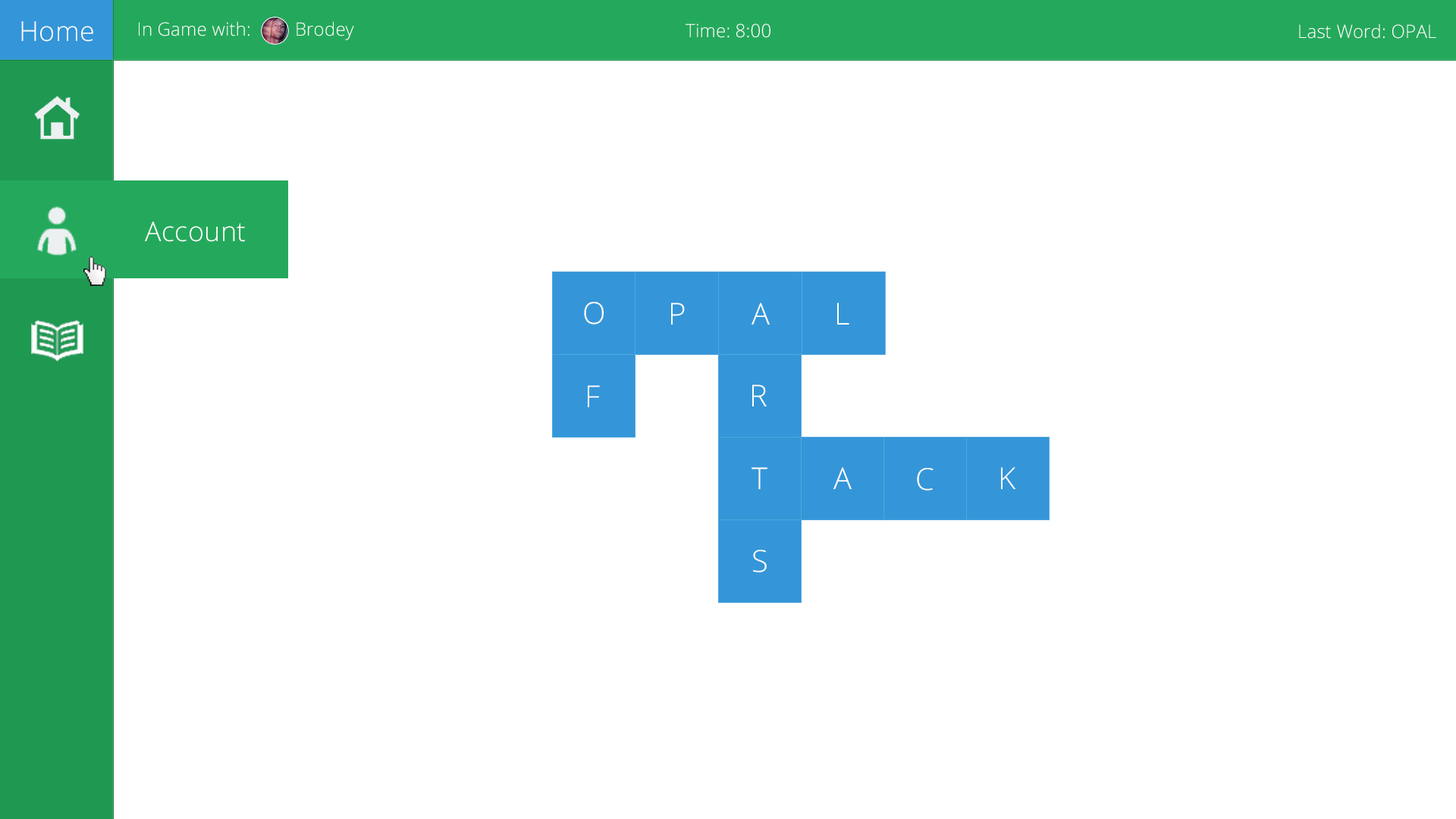
<style>
.page{position:relative;width:1456px;height:819px;background:#ffffff}
.page>*{position:absolute;margin:0}
.t1{font:27.3px "OpenSans-Light";letter-spacing:0.008em;color:#ffffff}
.t2{font:18.2px "OpenSans-Light";letter-spacing:0.008em;color:#ffffff}
</style>
<div class="page">
<p class="t1" style="left:21px;top:21px;width:72px;height:21px">Home</p>
<p class="t2" style="left:139px;top:21px;width:215px;height:19px">In Game with:         Brodey</p>
<p class="t2" style="left:686px;top:24px;width:84px;height:14px">Time: 8:00</p>
<p class="t2" style="left:1299px;top:24px;width:137px;height:15px">Last Word: OPAL</p>
<p class="t1" style="left:145px;top:221px;width:100px;height:21px">Account</p>
</div>
